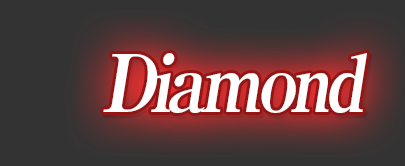
<style>
.page{position:relative;width:405px;height:166px;background:#333333}
.page>*{position:absolute;margin:0}
.t1{font:80px "RyuminPro-ExBold";letter-spacing:-0.08em;color:#ffffff;font-style:italic;scale:0.9 1}
</style>
<div class="page">
<p class="t1" style="left:103px;top:53px;width:264px;height:60px">Diamond</p>
</div>
